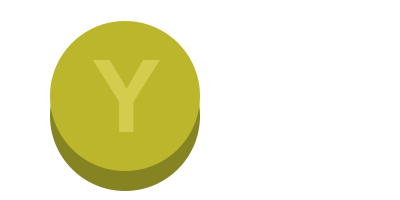
<style>
.page{position:relative;width:400px;height:200px;background:#ffffff}
.page>*{position:absolute;margin:0}
.t1{font:100px "Arial-BoldMT";color:#d2cd4d}
</style>
<div class="page">
<p class="t1" style="left:93px;top:60px;width:67px;height:72px">Y</p>
</div>
